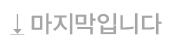
<style>
.page{position:relative;width:171px;height:48px;background:#ffffff}
.page>*{position:absolute;margin:0}
.t1{font:24px "YDIYGO330";color:#a6a6a6}
</style>
<div class="page">
<p class="t1" style="left:31px;top:13px;width:131px;height:22px">마지막입니다</p>
</div>
